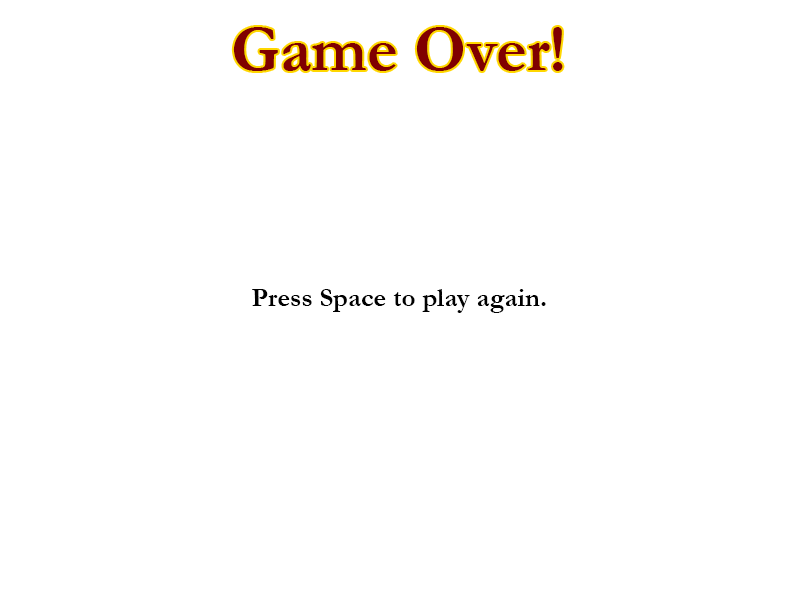
<style>
.page{position:relative;width:800px;height:600px;background:#ffffff}
.page>*{position:absolute;margin:0}
.t1{font:66px "Garamond-Bold";color:#800000}
.t2{font:27px "Garamond-Bold";color:#000000}
</style>
<div class="page">
<p class="t1" style="left:233px;top:27px;width:330px;height:44px">Game Over!</p>
<p class="t2" style="left:252px;top:289px;width:294px;height:24px">Press Space to play again.</p>
</div>
